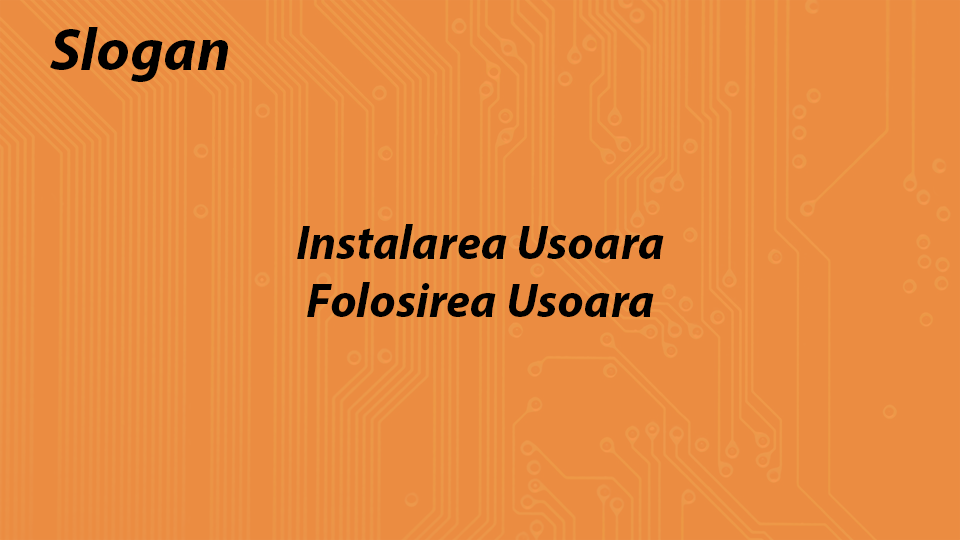
<style>
.page{position:relative;width:960px;height:540px;background:#eb8c41}
.page>*{position:absolute;margin:0}
.t1{font:60px "MyriadPro-BoldIt";color:#000000}
.t2{font:48px "MyriadPro-BoldIt";color:#000000}
</style>
<div class="page">
<p class="t1" style="left:50px;top:27px;width:178px;height:55px">Slogan</p>
<p class="t2" style="left:297px;top:224px;width:367px;height:93px;text-align:center">Instalarea Usoara<br>Folosirea Usoara</p>
</div>
